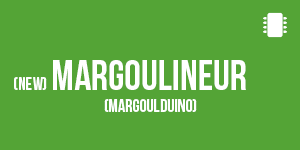
<style>
.page{position:relative;width:300px;height:150px;background:#54a436}
.page>*{position:absolute;margin:0}
.t1{font:18px "BebasNeue";color:#ffffff}
.t2{font:42px "BebasNeue";color:#ffffff}
</style>
<div class="page">
<p class="t1" style="left:53px;top:60px;width:193px;height:52px;text-align:center"><span class="t2">margoulineur<br></span> (MArgoulduino)</p>
<p class="t1" style="left:14px;top:77px;width:33px;height:13px">(new)</p>
</div>
